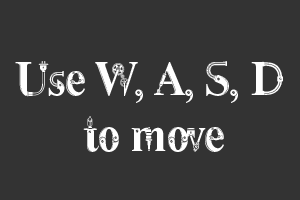
<style>
.page{position:relative;width:300px;height:200px;background:#333333}
.page>*{position:absolute;margin:0}
.t1{font:47px "Steamy";letter-spacing:-0.04em;color:#ffffff}
</style>
<div class="page">
<p class="t1" style="left:15px;top:61px;width:268px;height:91px;text-align:center">Use W, A, S, D <br>to move</p>
</div>
